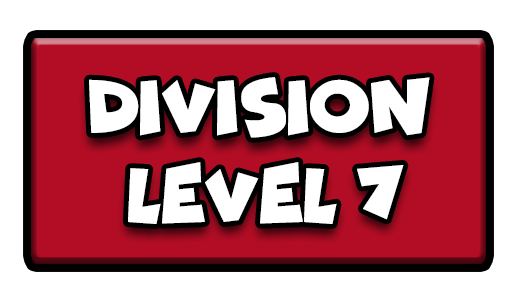
<style>
.page{position:relative;width:517px;height:301px;background:#ffffff}
.page>*{position:absolute;margin:0}
.t1{font:77.7px "Funhouse";color:#ffffff;scale:0.95 1}
</style>
<div class="page">
<p class="t1" style="left:89px;top:77px;width:341px;height:61px">DIVISION</p>
<p class="t1" style="left:128px;top:162px;width:276px;height:62px">LEVEL 7</p>
</div>
